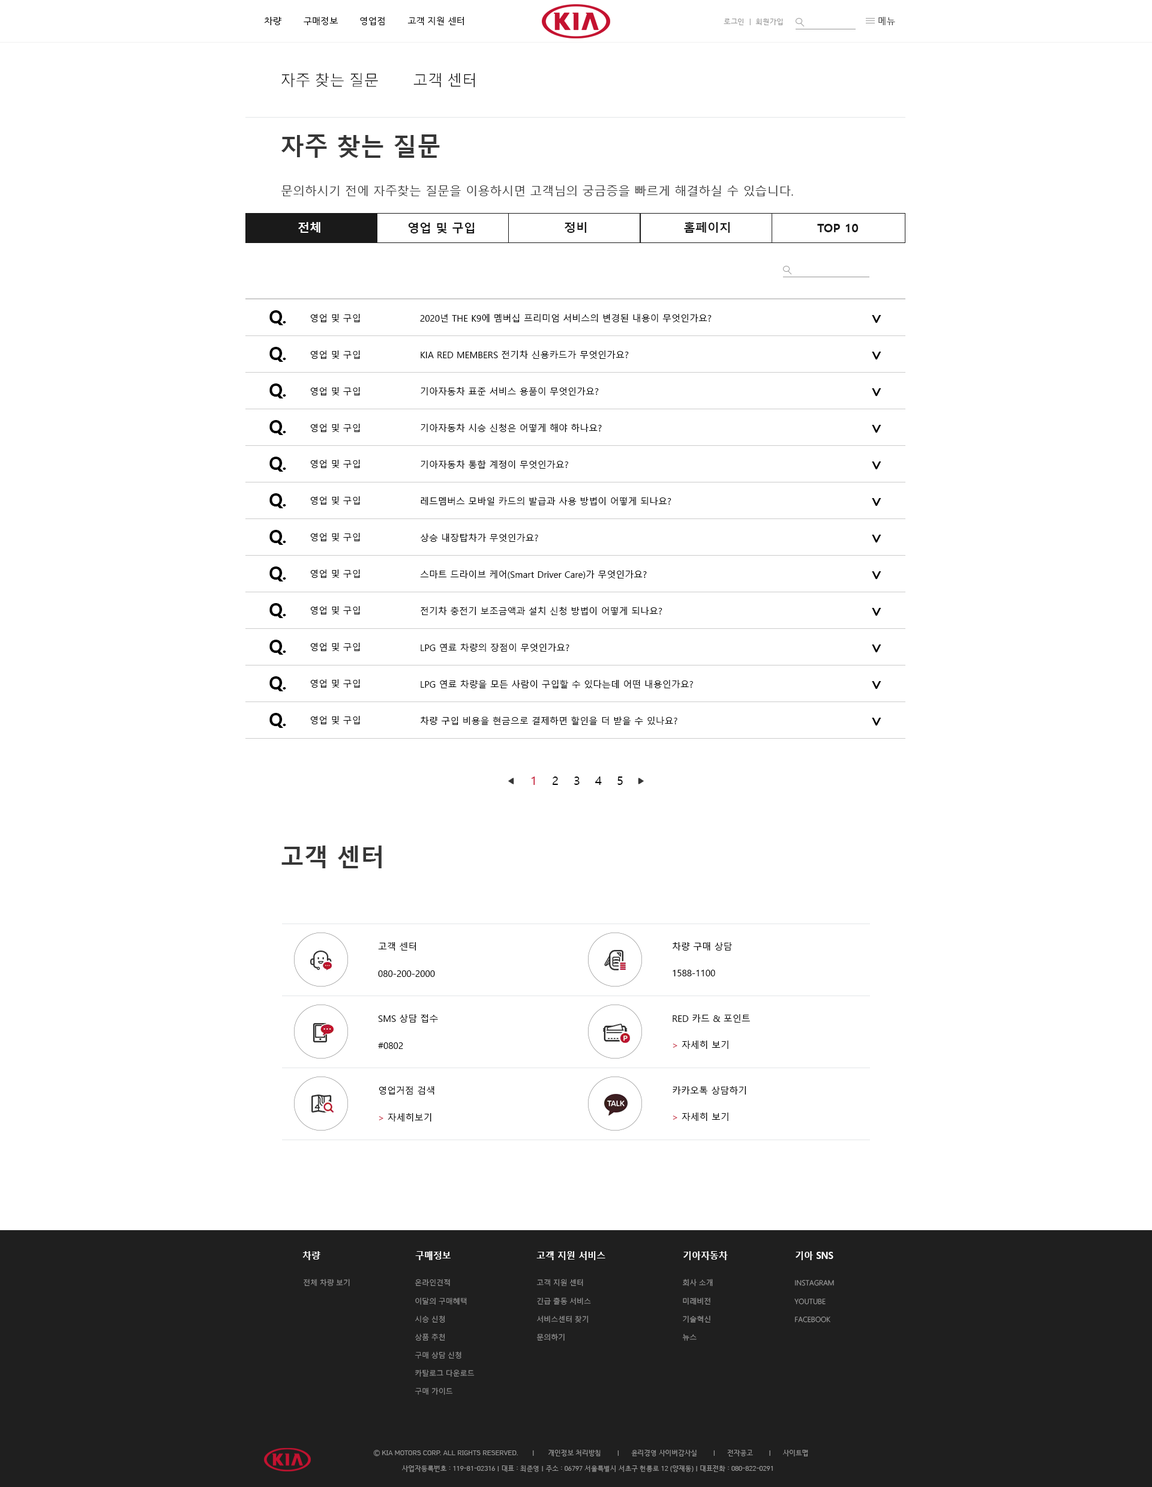
<style>
.page{position:relative;width:1152px;height:1487px;background:#ffffff}
.page>*{position:absolute;margin:0}
.t1{font:9px "HCRDotum";color:#000000}
.t2{font:9px "HCRDotum";color:#4c4c4c}
.t3{font:7.2px "HCRDotum";color:#979797}
.t4{font:14.8px "MalgunGothic-Semilight";color:#000000}
.t5{font:24px "MalgunGothicBold";color:#363636}
.t6{font:12px "MalgunGothic";color:#363636}
.t7{font:12px "MalgunGothicBold";color:#ffffff}
.t8{font:12px "MalgunGothicBold";color:#1a1a1a}
.t9{font:18px "MalgunGothicBold";color:#000000}
.t10{font:9px "MalgunGothic";color:#000000}
.t11{font:12px "MalgunGothic";color:#000000}
.t12{font:15px "MalgunGothic";color:#000000}
.t13{font:12px "MalgunGothic";color:#c41230}
.t14{font:9px "MalgunGothic";color:#c41230}
.t15{font:9.3px "MalgunGothicBold";color:#ffffff;scale:0.96 1}
.t16{font:7.2px "MalgunGothic-Semilight";color:#979797}
.t17{font:7.2px/18.1px "MalgunGothic-Semilight";color:#979797}
.t18{font:6.6px "HCRDotum";color:#999999}
</style>
<div class="page">
<p class="t1" style="left:264px;top:17px;width:200px;height:8px">차량        구매정보        영업점        고객 지원 센터</p>
<p class="t2" style="left:878px;top:17px;width:17px;height:8px">메뉴</p>
<p class="t3" style="left:724px;top:19px;width:59px;height:6px">로그인  |  회원가입</p>
<p class="t4" style="left:281px;top:73px;width:194px;height:15px">자주 찾는 질문        고객 센터</p>
<p class="t5" style="left:281px;top:134px;width:159px;height:24px">자주 찾는 질문</p>
<p class="t6" style="left:281px;top:185px;width:512px;height:11px">문의하시기 전에 자주찾는 질문을 이용하시면 고객님의 궁금증을 빠르게 해결하실 수 있습니다.</p>
<p class="t7" style="left:298px;top:222px;width:22px;height:11px">전체</p>
<p class="t8" style="left:565px;top:222px;width:21px;height:11px">정비</p>
<p class="t8" style="left:684px;top:222px;width:46px;height:11px">홈페이지</p>
<p class="t8" style="left:408px;top:223px;width:67px;height:10px">영업 및 구입</p>
<p class="t8" style="left:817px;top:224px;width:42px;height:8px">TOP 10</p>
<p class="t9" style="left:269px;top:310px;width:17px;height:15px">Q.</p>
<p class="t10" style="left:310px;top:314px;width:50px;height:8px">영업 및 구입</p>
<p class="t10" style="left:420px;top:314px;width:292px;height:8px">2020년 THE K9에 멤버십 프리미엄 서비스의 변경된 내용이 무엇인가요?</p>
<p class="t9" style="left:269px;top:347px;width:17px;height:15px">Q.</p>
<p class="t10" style="left:310px;top:350px;width:50px;height:9px">영업 및 구입</p>
<p class="t10" style="left:421px;top:350px;width:208px;height:9px">KIA RED MEMBERS 전기차 신용카드가 무엇인가요?</p>
<p class="t9" style="left:269px;top:383px;width:17px;height:15px">Q.</p>
<p class="t10" style="left:310px;top:387px;width:50px;height:8px">영업 및 구입</p>
<p class="t10" style="left:421px;top:387px;width:178px;height:9px">기아자동차 표준 서비스 용품이 무엇인가요?</p>
<p class="t9" style="left:269px;top:420px;width:17px;height:15px">Q.</p>
<p class="t10" style="left:310px;top:424px;width:50px;height:8px">영업 및 구입</p>
<p class="t10" style="left:421px;top:424px;width:181px;height:8px">기아자동차 시승 신청은 어떻게 해야 하나요?</p>
<p class="t9" style="left:269px;top:457px;width:17px;height:15px">Q.</p>
<p class="t10" style="left:310px;top:460px;width:50px;height:8px">영업 및 구입</p>
<p class="t10" style="left:421px;top:460px;width:147px;height:9px">기아자동차 통합 계정이 무엇인가요?</p>
<p class="t9" style="left:269px;top:493px;width:17px;height:15px">Q.</p>
<p class="t10" style="left:310px;top:496px;width:50px;height:9px">영업 및 구입</p>
<p class="t10" style="left:421px;top:497px;width:250px;height:8px">레드멤버스 모바일 카드의 발급과 사용 방법이 어떻게 되나요?</p>
<p class="t9" style="left:269px;top:530px;width:17px;height:15px">Q.</p>
<p class="t10" style="left:310px;top:533px;width:50px;height:8px">영업 및 구입</p>
<p class="t10" style="left:421px;top:533px;width:117px;height:9px">상승 내장탑차가 무엇인가요?</p>
<p class="t9" style="left:269px;top:566px;width:17px;height:15px">Q.</p>
<p class="t10" style="left:310px;top:569px;width:50px;height:9px">영업 및 구입</p>
<p class="t10" style="left:420px;top:570px;width:227px;height:9px">스마트 드라이브 케어(Smart Driver Care)가 무엇인가요?</p>
<p class="t9" style="left:269px;top:603px;width:17px;height:15px">Q.</p>
<p class="t10" style="left:310px;top:606px;width:50px;height:8px">영업 및 구입</p>
<p class="t10" style="left:421px;top:607px;width:241px;height:9px">전기차 충전기 보조금액과 설치 신청 방법이 어떻게 되나요?</p>
<p class="t9" style="left:269px;top:640px;width:17px;height:15px">Q.</p>
<p class="t10" style="left:310px;top:643px;width:50px;height:8px">영업 및 구입</p>
<p class="t10" style="left:421px;top:643px;width:148px;height:9px">LPG 연료 차량의 장점이 무엇인가요?</p>
<p class="t9" style="left:269px;top:676px;width:17px;height:15px">Q.</p>
<p class="t10" style="left:310px;top:679px;width:50px;height:9px">영업 및 구입</p>
<p class="t10" style="left:421px;top:679px;width:272px;height:10px">LPG 연료 차량을 모든 사람이 구입할 수 있다는데 어떤 내용인가요?</p>
<p class="t9" style="left:269px;top:713px;width:17px;height:15px">Q.</p>
<p class="t10" style="left:310px;top:716px;width:50px;height:8px">영업 및 구입</p>
<p class="t10" style="left:421px;top:716px;width:256px;height:9px">차량 구입 비용을 현금으로 결제하면 할인을 더 받을 수 있나요?</p>
<p class="t11" style="left:532px;top:776px;width:91px;height:9px"><span class="t12"> </span><span class="t13">1</span> 2 3 4 5</p>
<p class="t5" style="left:281px;top:845px;width:101px;height:23px">고객 센터</p>
<p class="t10" style="left:378px;top:942px;width:38px;height:8px">고객 센터</p>
<p class="t10" style="left:673px;top:942px;width:59px;height:8px">차량 구매 상담</p>
<p class="t10" style="left:378px;top:970px;width:57px;height:7px">080-200-2000</p>
<p class="t10" style="left:673px;top:970px;width:42px;height:6px">1588-1100</p>
<p class="t10" style="left:378px;top:1014px;width:60px;height:8px">SMS 상담 접수</p>
<p class="t10" style="left:673px;top:1014px;width:77px;height:8px">RED 카드 &amp; 포인트</p>
<p class="t10" style="left:378px;top:1042px;width:25px;height:7px">#0802</p>
<p class="t10" style="left:673px;top:1040px;width:55px;height:9px"><span class="t14">&gt;</span> 자세히 보기</p>
<p class="t10" style="left:379px;top:1086px;width:55px;height:8px">영업거점 검색</p>
<p class="t10" style="left:673px;top:1086px;width:73px;height:9px">카카오톡 상담하기</p>
<p class="t10" style="left:379px;top:1113px;width:52px;height:8px"><span class="t14">&gt;</span> 자세히보기</p>
<p class="t10" style="left:673px;top:1112px;width:55px;height:9px"><span class="t14">&gt;</span> 자세히 보기</p>
<p class="t15" style="left:302px;top:1251px;width:18px;height:9px">차량</p>
<p class="t15" style="left:415px;top:1251px;width:36px;height:9px">구매정보</p>
<p class="t15" style="left:536px;top:1251px;width:69px;height:9px">고객 지원 서비스</p>
<p class="t15" style="left:683px;top:1251px;width:45px;height:9px">기아자동차</p>
<p class="t15" style="left:796px;top:1251px;width:37px;height:9px">기아 SNS</p>
<p class="t16" style="left:304px;top:1279px;width:46px;height:7px">전체 차량 보기</p>
<p class="t17" style="left:415px;top:1279px;width:60px;height:116px">온라인견적<br>이달의 구매혜택<br>시승 신청<br>상품 추천<br>구매 상담 신청<br>카탈로그 다운로드<br>구매 가이드</p>
<p class="t17" style="left:536px;top:1279px;width:55px;height:62px">고객 지원 센터<br>긴급 출동 서비스<br>서비스센터 찾기<br>문의하기</p>
<p class="t17" style="left:682px;top:1279px;width:31px;height:62px">회사 소개<br>미래비전<br>기술혁신<br>뉴스</p>
<p class="t17" style="left:794px;top:1280px;width:40px;height:42px">INSTAGRAM<br>YOUTUBE<br>FACEBOOK</p>
<p class="t18" style="left:373px;top:1450px;width:435px;height:6px">Ⓒ KIA MOTORS CORP. ALL RIGHTS RESERVED.       |       개인정보 처리방침        |      윤리경영 사이버감사실        |      전자공고        |      사이트맵</p>
<p class="t18" style="left:402px;top:1465px;width:371px;height:7px">사업자등록번호 : 119-81-02316 | 대표 : 최준영 | 주소 : 06797 서울특별시 서초구 헌릉로 12 (양재동) | 대표전화 : 080-822-0291</p>
</div>
